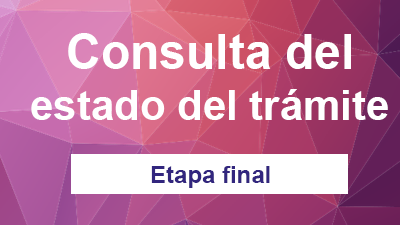
<style>
.page{position:relative;width:400px;height:225px}
.page>*{position:absolute;margin:0}
.t1{font:48px "Arial-BoldMT";color:#ffffff}
.t2{font:42px "Arial-BoldMT";color:#ffffff}
.t3{font:24px "Arial-BoldMT";color:#32267e}
</style>
<div class="page">
<p class="t1" style="left:68px;top:33px;width:283px;height:36px">Consulta del</p>
<p class="t2" style="left:31px;top:89px;width:357px;height:31px">estado del trámite</p>
<p class="t3" style="left:151px;top:166px;width:119px;height:22px">Etapa final</p>
</div>
